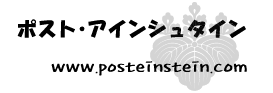
<style>
.page{position:relative;width:273px;height:93px;background:#ffffff}
.page>*{position:absolute;margin:0}
.t1{font:20px "HGSoeiKakupoptai";color:#000000}
.t2{font:20px "HYbdaL";color:#000000}
</style>
<div class="page">
<p class="t1" style="left:17px;top:19px;width:229px;height:19px">ポスト･アインシュタイン</p>
<p class="t2" style="left:51px;top:61px;width:196px;height:15px">www.posteinstein.com</p>
</div>
